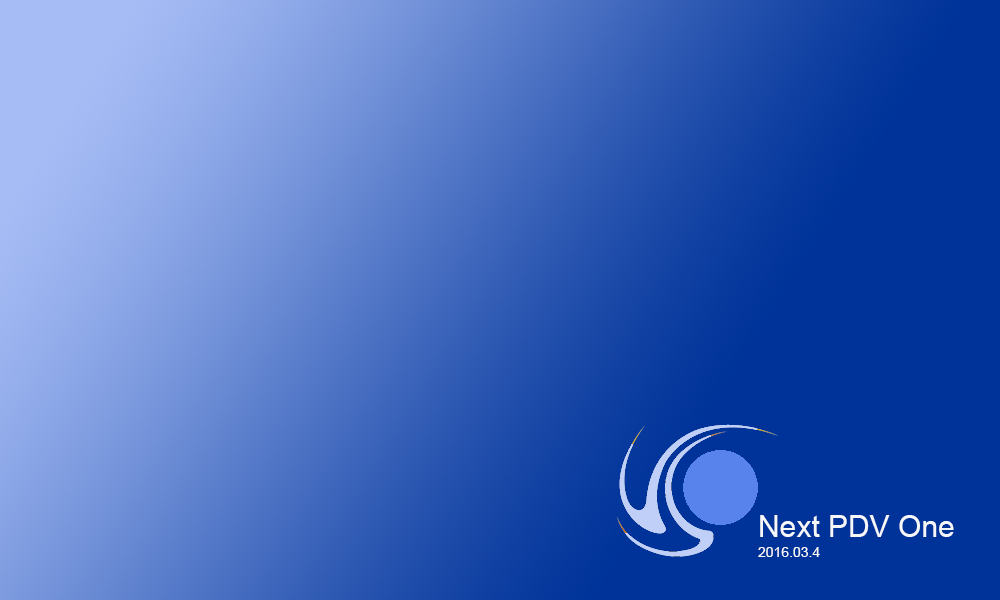
<style>
.page{position:relative;width:1000px;height:600px;background:#003399}
.page>*{position:absolute;margin:0}
.t1{font:30px "ArialMT";color:#f6f7f8}
.t2{font:14px "ArialMT";color:#f6f7f8}
</style>
<div class="page">
<p class="t1" style="left:760px;top:515px;width:194px;height:22px">Next PDV One</p>
<p class="t2" style="left:758px;top:547px;width:62px;height:10px">2016.03.4</p>
</div>
